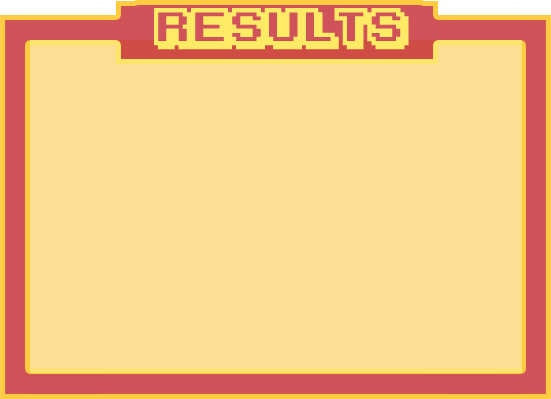
<style>
.page{position:relative;width:551px;height:399px;background:#fcdf92}
.page>*{position:absolute;margin:0}
.t1{font:42px "KarmaticArcade";color:#feea65}
</style>
<div class="page">
<p class="t1" style="left:154px;top:8px;width:255px;height:42px">RESULTS</p>
</div>
